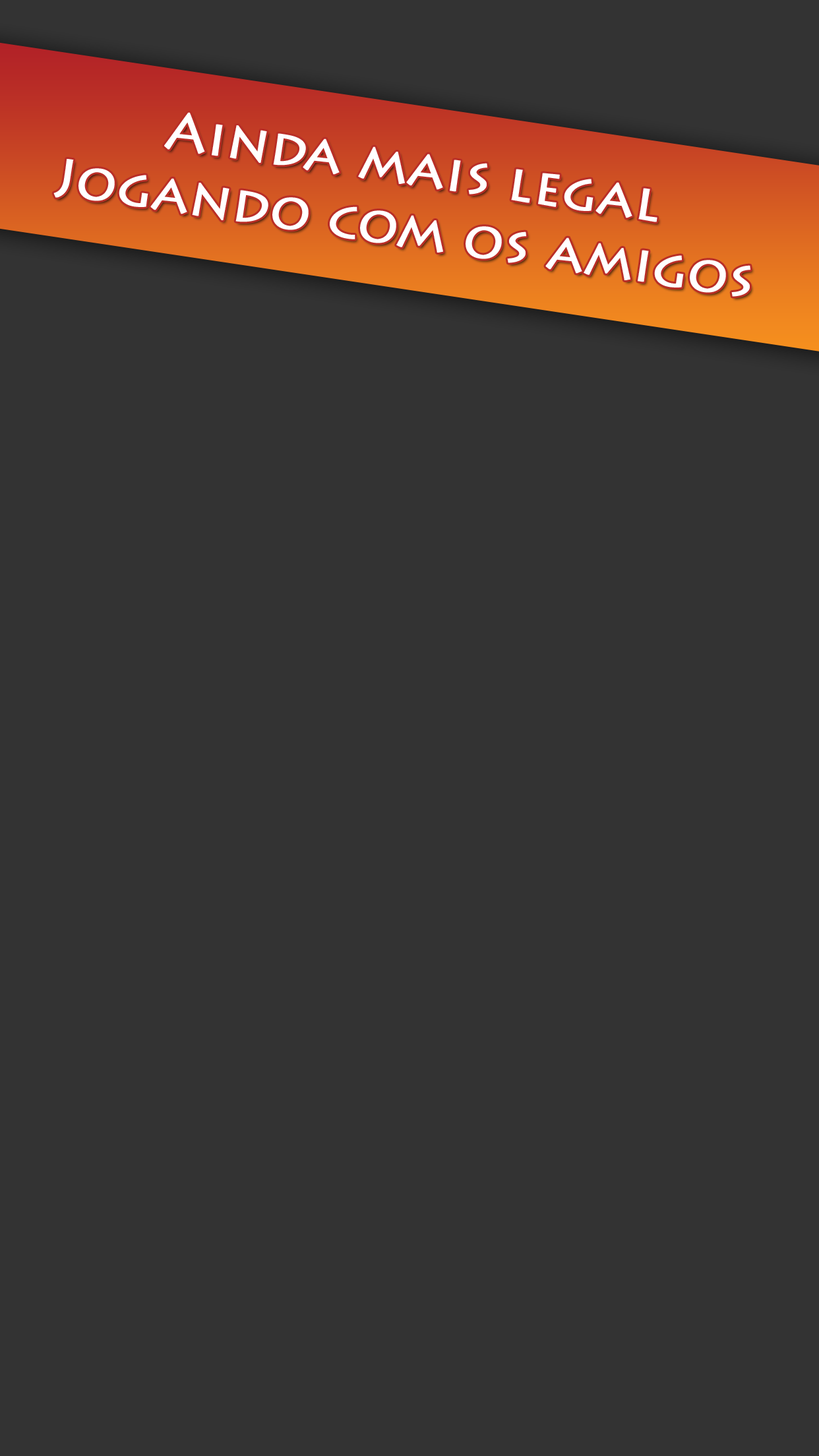
<style>
.page{position:relative;width:819px;height:1456px;background:#333333}
.page>*{position:absolute;margin:0}
.t1{font:51.5px "LithosPro-Regular";color:#ffffff;font-weight:bold}
</style>
<div class="page">
<p class="t1" style="left:53px;top:112px;width:697px;height:185px;text-align:center;rotate:9deg">Ainda mais legal<br>Jogando com os amigos</p>
</div>
